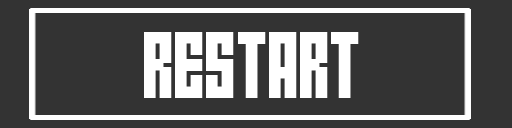
<style>
.page{position:relative;width:512px;height:128px;background:#333333}
.page>*{position:absolute;margin:0}
.t1{font:78px "AngiesNewHouse";color:#ffffff}
</style>
<div class="page">
<p class="t1" style="left:144px;top:32px;width:215px;height:66px">RESTART</p>
</div>
